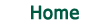
<style>
.page{position:relative;width:107px;height:25px;background:#ffffff}
.page>*{position:absolute;margin:0}
.t1{font:18px "Tahoma";letter-spacing:0.02em;color:#005941;font-weight:bold}
</style>
<div class="page">
<p class="t1" style="left:31px;top:5px;width:48px;height:15px">Home</p>
</div>
